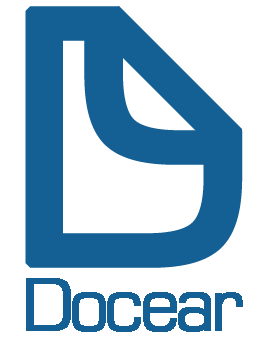
<style>
.page{position:relative;width:255px;height:348px;background:#ffffff}
.page>*{position:absolute;margin:0}
.t1{font:346px "Square721BT-Roman";letter-spacing:-0.105em;color:#146094;font-weight:bold}
.t2{font:72px "Square721BT-Roman";letter-spacing:-0.105em;color:#146094;font-weight:bold}
</style>
<div class="page">
<p class="t1" style="left:25px;top:6px;width:218px;height:262px">D</p>
<p class="t1" style="left:84px;top:0px;width:171px;height:165px;rotate:-180deg">D</p>
<p class="t2" style="left:26px;top:278px;width:217px;height:54px">Docear</p>
</div>
